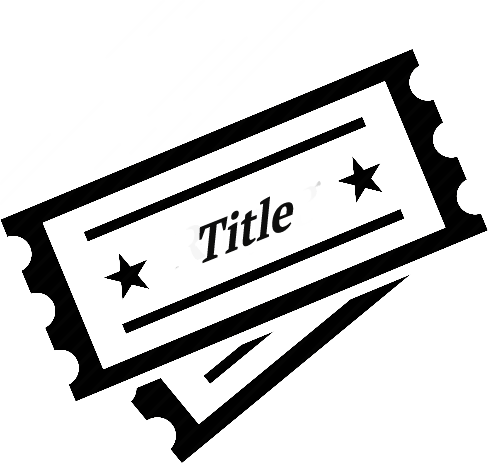
<style>
.page{position:relative;width:488px;height:463px;background:#ffffff}
.page>*{position:absolute;margin:0}
.t1{font:54.8px "PTSerif-Bold";color:#0e0e0d;scale:0.84 1}
</style>
<div class="page">
<p class="t1" style="left:199px;top:196px;width:95px;height:68px;rotate:-22deg">Title</p>
</div>
